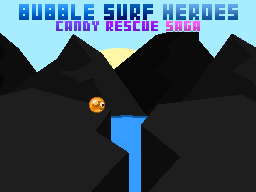
<style>
.page{position:relative;width:256px;height:192px;background:#1e1e1e}
.page>*{position:absolute;margin:0}
.t1{font:24px "04b24";font-weight:bold}
.t2{font:16px "04b24";font-weight:bold}
</style>
<div class="page">
<p class="t1" style="left:19px;top:4px;width:219px;height:16px">BUBBLE SURF HEROES</p>
<p class="t2" style="left:56px;top:21px;width:144px;height:10px">CANDY RESCUE SAGA</p>
</div>
